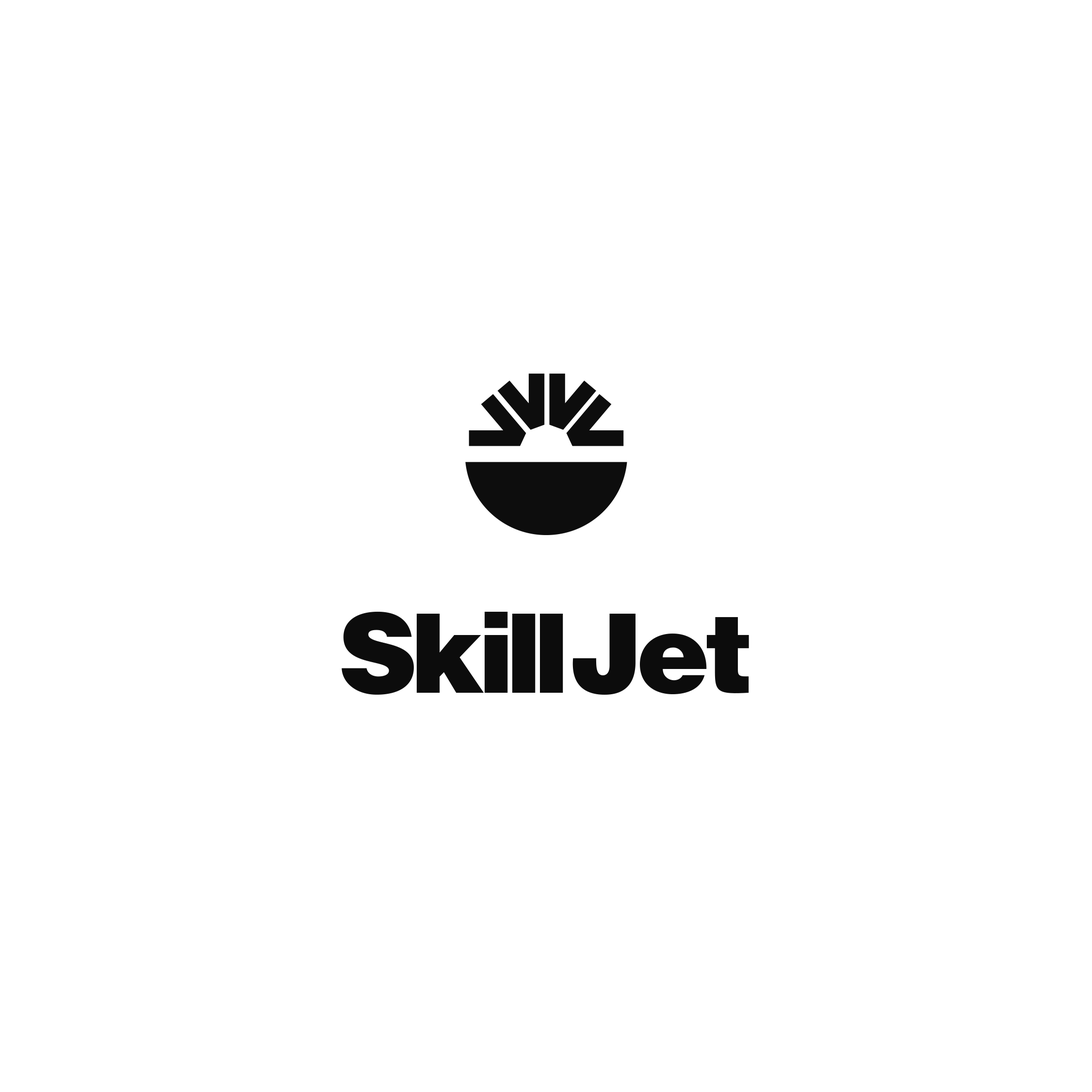
<style>
.page{position:relative;width:1092px;height:1092px;background:#ffffff}
.page>*{position:absolute;margin:0}
.t1{font:109.9px "Helvetica-Black";color:#0d0d0d}
</style>
<div class="page">
<p class="t1" style="left:342px;top:611px;width:407px;height:84px">SkillJet</p>
</div>
